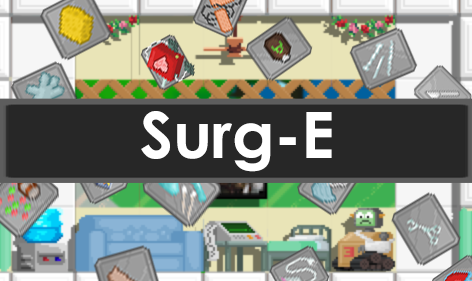
<style>
.page{position:relative;width:472px;height:281px;background:#272727}
.page>*{position:absolute;margin:0}
.t1{font:64px "CenturyGothic-Bold";color:#ffffff}
</style>
<div class="page">
<p class="t1" style="left:141px;top:111px;width:191px;height:61px">Surg-E</p>
</div>
